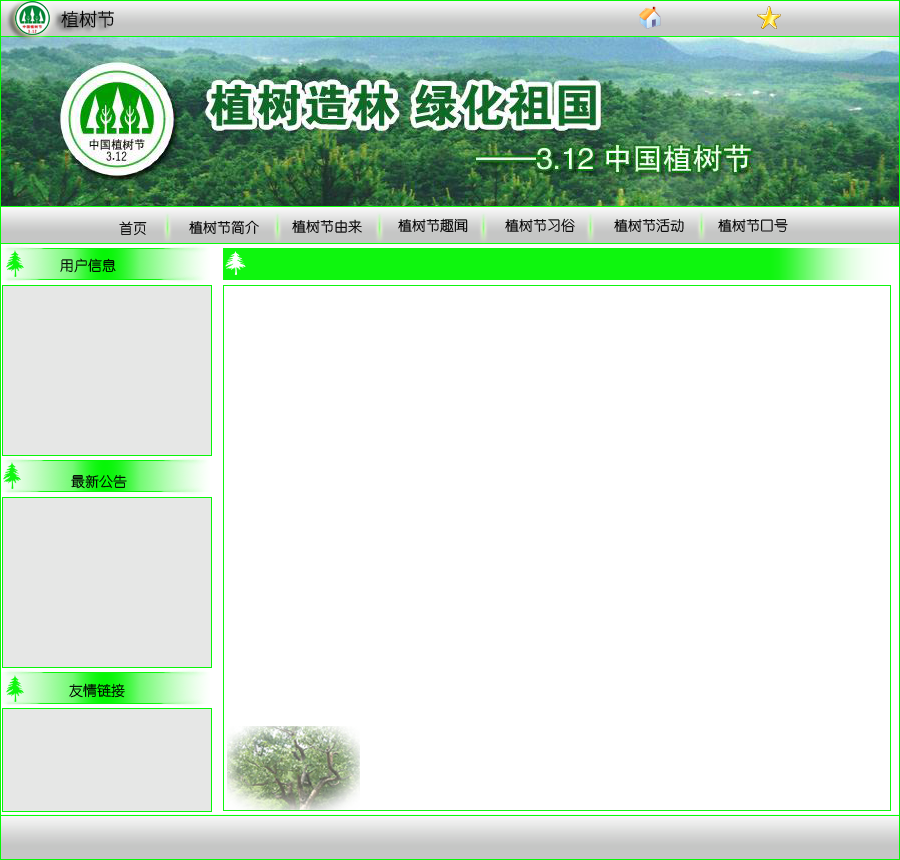
<style>
.page{position:relative;width:900px;height:860px;background:#ffffff}
.page>*{position:absolute;margin:0}
.t1{font:18px "YouYuan";color:#030303}
.t2{font:14px "YouYuan"}
.t3{font:14px "YouYuan";color:#000000}
</style>
<div class="page">
<p class="t1" style="left:61px;top:10px;width:53px;height:18px">植树节</p>
<p class="t2" style="left:119px;top:221px;width:28px;height:15px">首页</p>
<p class="t3" style="left:189px;top:220px;width:70px;height:15px">植树节简介</p>
<p class="t3" style="left:292px;top:219px;width:70px;height:15px">植树节由来</p>
<p class="t3" style="left:398px;top:218px;width:70px;height:15px">植树节趣闻</p>
<p class="t3" style="left:505px;top:218px;width:70px;height:14px">植树节习俗</p>
<p class="t3" style="left:614px;top:218px;width:70px;height:14px">植树节活动</p>
<p class="t3" style="left:718px;top:218px;width:70px;height:15px">植树节口号</p>
<p class="t3" style="left:60px;top:258px;width:56px;height:15px">用户信息</p>
<p class="t3" style="left:71px;top:474px;width:56px;height:15px">最新公告</p>
<p class="t3" style="left:69px;top:683px;width:56px;height:15px">友情链接</p>
</div>
